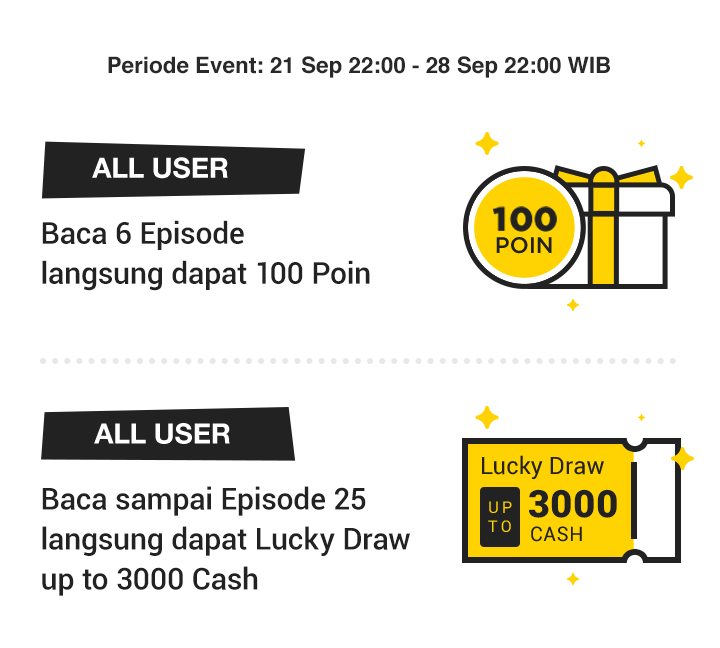
<style>
.page{position:relative;width:720px;height:648px;background:#ffffff}
.page>*{position:absolute;margin:0}
.t1{font:22.4px "Helvetica-Bold";color:#292929}
.t2{font:28px "HelveticaNeue-Bold";color:#ffffff}
.t3{font:33.5px "GothamBlack";color:#222222}
.t4{font:30px/40px "Roboto-Medium";color:#222222}
.t5{font:22.4px "Gotham-Medium";color:#222222}
.t6{font:24px "Roboto-Regular";color:#222222}
.t7{font:38px "Roboto-Black";letter-spacing:0.025em;color:#222222}
.t8{font:16px "Roboto-Regular";letter-spacing:0.2em;color:#ffd201}
.t9{font:20px "Roboto-Regular";letter-spacing:0.025em;color:#222222}
</style>
<div class="page">
<p class="t1" style="left:108px;top:56px;width:502px;height:22px">Periode Event: 21 Sep 22:00 - 28 Sep 22:00 WIB</p>
<p class="t2" style="left:92px;top:157px;width:136px;height:22px">ALL USER</p>
<p class="t3" style="left:492px;top:206px;width:65px;height:26px">100</p>
<p class="t4" style="left:42px;top:220px;width:328px;height:71px">Baca 6 Episode<br>langsung dapat 100 Poin</p>
<p class="t5" style="left:496px;top:237px;width:56px;height:17px">POIN</p>
<p class="t2" style="left:94px;top:423px;width:136px;height:21px">ALL USER</p>
<p class="t6" style="left:482px;top:455px;width:122px;height:24px">Lucky Draw</p>
<p class="t4" style="left:42px;top:486px;width:368px;height:110px">Baca sampai Episode 25<br>langsung dapat Lucky Draw <br>up to 3000 Cash</p>
<p class="t7" style="left:529px;top:489px;width:88px;height:29px">3000</p>
<p class="t8" style="left:488px;top:501px;width:24px;height:31px">UP<br>TO</p>
<p class="t9" style="left:531px;top:526px;width:51px;height:16px">CASH</p>
</div>
